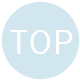
<style>
.page{position:relative;width:80px;height:80px;background:#d1e6ee}
.page>*{position:absolute;margin:0}
.t1{font:36.1px "FranklinGothic-Book";letter-spacing:0.05em;color:#ffffff}
</style>
<div class="page">
<p class="t1" style="left:10px;top:30px;width:63px;height:24px">TOP</p>
</div>
